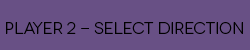
<style>
.page{position:relative;width:250px;height:50px;background:#685085}
.page>*{position:absolute;margin:0}
.t1{font:16px "Novecentowide-Book";color:#000000}
</style>
<div class="page">
<p class="t1" style="left:6px;top:22px;width:237px;height:12px">Player 2 - Select Direction</p>
</div>
